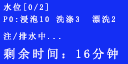
<style>
.page{position:relative;width:128px;height:64px;background:#142ef4}
.page>*{position:absolute;margin:0}
.t1{font:8px "SimSun";letter-spacing:0.2em;color:#ffffff}
.t2{font:12px "SimSun";letter-spacing:0.2em;color:#ffffff}
</style>
<div class="page">
<p class="t1" style="left:3px;top:3px;width:45px;height:8px">水位[0/2]</p>
<p class="t1" style="left:3px;top:15px;width:112px;height:8px">P0:浸泡10 洗涤3  漂洗2</p>
<p class="t1" style="left:3px;top:32px;width:58px;height:8px">注/排水中...</p>
<p class="t2" style="left:3px;top:48px;width:115px;height:12px">剩余时间：16分钟</p>
</div>
